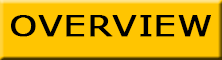
<style>
.page{position:relative;width:222px;height:60px;background:#ffc501}
.page>*{position:absolute;margin:0}
.t1{font:28.4px "Verdana";color:#000000;font-weight:bold;scale:1.25 1}
</style>
<div class="page">
<p class="t1" style="left:11px;top:15px;width:200px;height:22px">OVERVIEW</p>
</div>
